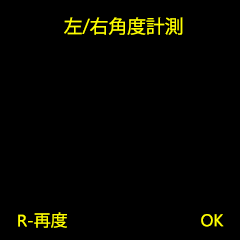
<style>
.page{position:relative;width:240px;height:240px;background:#000000}
.page>*{position:absolute;margin:0}
.t1{font:18.5px "KozGoPr6N-Regular";color:#ffff00}
.t2{font:16.4px "MicrosoftNewTaiLue";color:#ffff00;scale:1.03 1}
.t3{font:16.4px "KozGoPr6N-Regular";color:#ffff00;scale:1.03 1}
.t4{font:16.8px "MicrosoftNewTaiLue";color:#ffff00}
</style>
<div class="page">
<p class="t1" style="left:64px;top:17px;width:119px;height:18px">左/右角度計測</p>
<p class="t2" style="left:18px;top:212px;width:49px;height:16px">R-<span class="t3">再度</span></p>
<p class="t4" style="left:201px;top:214px;width:23px;height:13px">OK</p>
</div>
